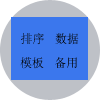
<style>
.page{position:relative;width:100px;height:100px;background:#3b77ed}
.page>*{position:absolute;margin:0}
.t1{font:12px "SimSun"}
.t2{font:12px "SimSun";color:#000102}
</style>
<div class="page">
<p class="t1" style="left:21px;top:33px;width:23px;height:12px">排序</p>
<p class="t2" style="left:55px;top:33px;width:24px;height:12px">数据</p>
<p class="t2" style="left:20px;top:57px;width:24px;height:12px">模板</p>
<p class="t1" style="left:55px;top:57px;width:22px;height:11px">备用</p>
</div>
